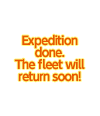
<style>
.page{position:relative;width:100px;height:116px;background:#ffffff}
.page>*{position:absolute;margin:0}
.t1{font:12px/12px "UDShinGoPro-Bold";letter-spacing:-0.08em;color:#e85700}
</style>
<div class="page">
<p class="t1" style="left:14px;top:34px;width:71px;height:48px;text-align:center">Expedition<br>done.<br>The fleet will<br>return soon!</p>
</div>
